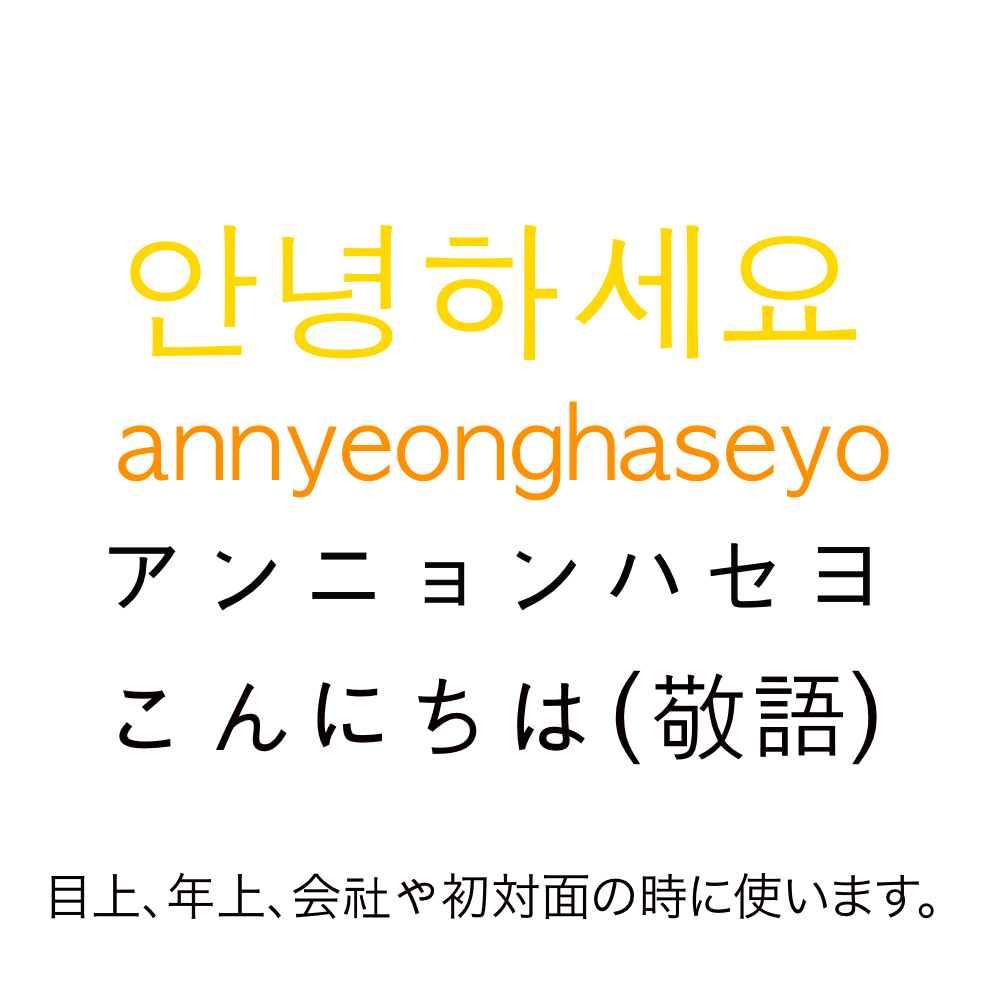
<style>
.page{position:relative;width:1000px;height:1000px;background:#ffffff}
.page>*{position:absolute;margin:0}
.t1{font:150px "AppleGothic";color:#ffd800}
.t2{font:100px "AppleGothic";color:#ff9000}
.t3{font:100px "AppleGothic";color:#060605}
.t4{font:100px "AppleGothic";color:#080000}
.t5{font:50px "HiraKakuProN-W3";color:#080000}
.t6{font:50px "AppleGothic";color:#080000}
</style>
<div class="page">
<p class="t1" style="left:130px;top:225px;width:726px;height:135px">안녕하세요</p>
<p class="t2" style="left:118px;top:401px;width:771px;height:100px">annyeonghaseyo</p>
<p class="t3" style="left:109px;top:543px;width:761px;height:68px">アンニョンハセヨ</p>
<p class="t4" style="left:119px;top:670px;width:758px;height:95px">こんにちは(敬語）</p>
<p class="t5" style="left:51px;top:872px;width:883px;height:48px">目上、年上、会<span class="t6">社や</span>初対面の時に使います。</p>
</div>
